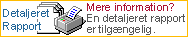
<style>
.page{position:relative;width:188px;height:37px;background:#ffffff}
.page>*{position:absolute;margin:0}
.t1{font:11px/11px "ArialMT";color:#555555}
.t2{font:11px/11px "ArialMT";color:#aa1133}
.t3{font:11px "ArialMT";color:#226699}
</style>
<div class="page">
<p class="t1" style="left:87px;top:3px;width:98px;height:32px"><span class="t2">Mere information?<br></span>En detaljeret rapport er tilgængelig.</p>
<p class="t3" style="left:3px;top:9px;width:46px;height:23px">Detaljeret<br>Rapport</p>
</div>
